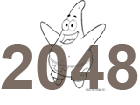
<style>
.page{position:relative;width:140px;height:105px;background:#ffffff}
.page>*{position:absolute;margin:0}
.t1{font:63px "Arial-BoldMT";color:#7b6d63}
</style>
<div class="page">
<p class="t1" style="left:1px;top:44px;width:137px;height:46px">2048</p>
</div>
